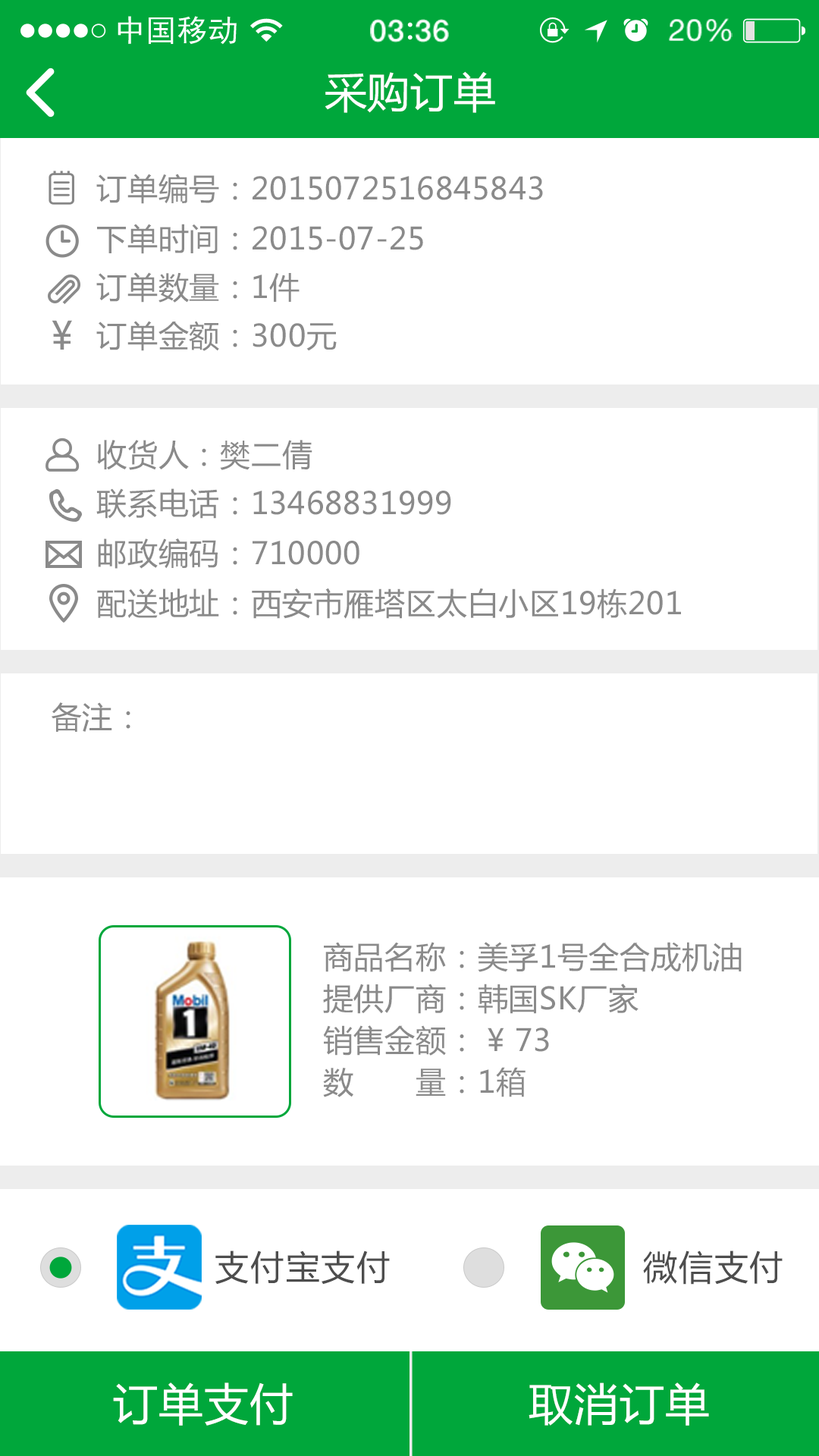
<style>
.page{position:relative;width:819px;height:1456px;background:#ffffff}
.page>*{position:absolute;margin:0}
.t1{font:41.7px "MicrosoftYaHei";letter-spacing:0.02em;color:#ffffff}
.t2{font:30.3px "MicrosoftYaHei";letter-spacing:0.02em;color:#8a8a8a}
.t3{font:38.4px "MicrosoftYaHei";letter-spacing:0.02em;color:#8a8a8a}
.t4{font:30.7px "MicrosoftYaHei";letter-spacing:0.02em;color:#8a8a8a}
.t5{font:30.3px/41.7px "MicrosoftYaHei";letter-spacing:0.02em;color:#8a8a8a}
.t6{font:30.3px/41.7px "MicrosoftYaHei";letter-spacing:0.04em;color:#8a8a8a}
.t7{font:34.1px "MicrosoftYaHei";letter-spacing:0.04em;color:#4d4d4d}
.t8{font:44px "MicrosoftYaHei";letter-spacing:0.02em;color:#ffffff}
</style>
<div class="page">
<p class="t1" style="left:325px;top:71px;width:170px;height:42px">采购订单</p>
<p class="t2" style="left:96px;top:174px;width:447px;height:30px">订单编号：2015072516845843</p>
<p class="t2" style="left:97px;top:224px;width:326px;height:30px">下单时间：2015-07-25</p>
<p class="t2" style="left:96px;top:272px;width:204px;height:31px">订单数量：1件</p>
<p class="t3" style="left:52px;top:320px;width:20px;height:30px">¥</p>
<p class="t2" style="left:96px;top:321px;width:241px;height:30px">订单金额：300元</p>
<p class="t4" style="left:97px;top:440px;width:215px;height:30px">收货人：樊二倩</p>
<p class="t4" style="left:96px;top:488px;width:355px;height:31px">联系电话：13468831999</p>
<p class="t4" style="left:98px;top:538px;width:261px;height:31px">邮政编码：710000</p>
<p class="t4" style="left:97px;top:588px;width:584px;height:31px">配送地址：西安市雁塔区太白小区19栋201</p>
<p class="t2" style="left:52px;top:702px;width:78px;height:30px">备注：</p>
<p class="t5" style="left:323px;top:942px;width:419px;height:155px">商品名称：美孚1号全合成机油<br>提供厂商：韩国SK厂家<br>销售金额： ¥ 73<br><span class="t6">数      量</span>：1箱</p>
<p class="t7" style="left:215px;top:1250px;width:175px;height:35px">支付宝支付</p>
<p class="t7" style="left:643px;top:1250px;width:140px;height:35px">微信支付</p>
<p class="t8" style="left:113px;top:1382px;width:180px;height:44px">订单支付</p>
<p class="t8" style="left:529px;top:1382px;width:180px;height:44px">取消订单</p>
</div>
